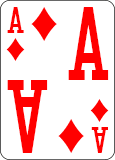
<style>
.page{position:relative;width:115px;height:160px;background:#ffffff}
.page>*{position:absolute;margin:0}
.t1{font:31.1px "CardCharacters";color:#ff0000;scale:0.95 1}
.t2{font:86.4px "CardCharacters";color:#ff0000;scale:0.83 1}
</style>
<div class="page">
<p class="t1" style="left:7px;top:7px;width:17px;height:26px">A</p>
<p class="t2" style="left:68px;top:7px;width:41px;height:73px">A</p>
<p class="t2" style="left:7px;top:80px;width:41px;height:73px;rotate:180deg">A</p>
<p class="t1" style="left:91px;top:127px;width:17px;height:26px;rotate:180deg">A</p>
</div>
